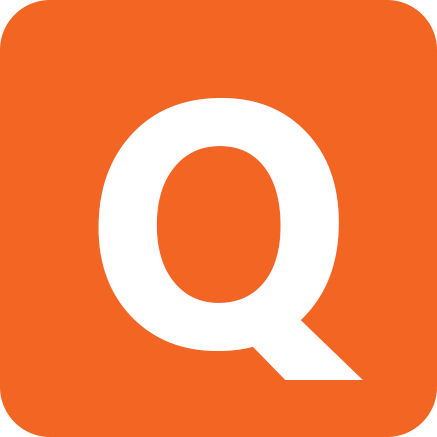
<style>
.page{position:relative;width:437px;height:437px;background:#f26522}
.page>*{position:absolute;margin:0}
.t1{font:350px "SegoeUI-Bold";color:#ffffff}
</style>
<div class="page">
<p class="t1" style="left:98px;top:98px;width:265px;height:282px">Q</p>
</div>
